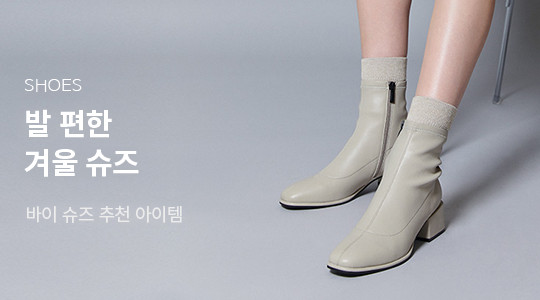
<style>
.page{position:relative;width:540px;height:300px}
.page>*{position:absolute;margin:0}
.t1{font:16px "NanumBarunGothicLight";letter-spacing:0.015em;color:#ffffff;scale:1.1 1}
.t2{font:30px "NotoSansKR-Bold";letter-spacing:-0.03em;color:#ffffff}
.t3{font:18px "NotoSansKR-Regular";letter-spacing:-0.03em;color:#ececec}
</style>
<div class="page">
<p class="t1" style="left:25px;top:79px;width:57px;height:13px">SHOES</p>
<p class="t2" style="left:26px;top:109px;width:86px;height:29px">발 편한</p>
<p class="t2" style="left:24px;top:149px;width:115px;height:28px">겨울 슈즈</p>
<p class="t3" style="left:27px;top:205px;width:155px;height:18px">바이 슈즈 추천 아이템</p>
</div>
